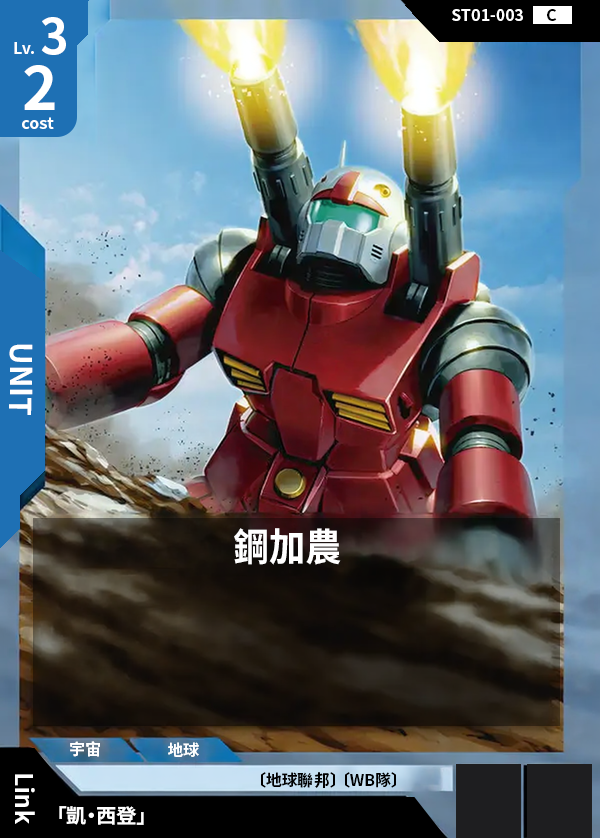
<style>
.page{position:relative;width:600px;height:838px}
.page>*{position:absolute;margin:0}
.t1{font:48px "NotoSansCJKtc-Bold";color:#ffffff}
.t2{font:16px "NotoSansCJKtc-Bold";color:#ffffff}
.t3{font:16px "NotoSansCJKtc-Bold";color:#000000}
.t4{font:60px "NotoSansCJKtc-Bold";color:#ffffff}
.t5{font:30px "NotoSansCJKtc-Bold";color:#ffffff}
.t6{font:38.4px "NotoSansCJKtc-Bold";color:#ffffff;scale:0.94 1}
.t7{font:24px "NotoSansCJKtc-Bold";color:#ffffff}
.t8{font:20px "NotoSansCJKtc-Bold";color:#ffffff}
</style>
<div class="page">
<p class="t1" style="left:41px;top:17px;width:25px;height:38px">3</p>
<p class="t2" style="left:452px;top:9px;width:71px;height:12px">ST01-003</p>
<p class="t3" style="left:547px;top:9px;width:10px;height:12px">C</p>
<p class="t2" style="left:14px;top:42px;width:20px;height:12px">Lv.</p>
<p class="t4" style="left:24px;top:65px;width:31px;height:45px">2</p>
<p class="t2" style="left:22px;top:117px;width:32px;height:12px">cost</p>
<p class="t5" style="left:9px;top:344px;width:24px;height:71px;rotate:90deg">UNIT</p>
<p class="t6" style="left:234px;top:528px;width:107px;height:37px">鋼加農</p>
<p class="t2" style="left:70px;top:741px;width:30px;height:16px">宇宙</p>
<p class="t2" style="left:168px;top:742px;width:31px;height:15px">地球</p>
<p class="t7" style="left:15px;top:774px;width:20px;height:50px;rotate:90deg">Link</p>
<p class="t3" style="left:261px;top:772px;width:135px;height:16px">〔地球聯邦〕 〔WB隊〕</p>
<p class="t8" style="left:59px;top:806px;width:85px;height:19px">「凱・西登」</p>
</div>
